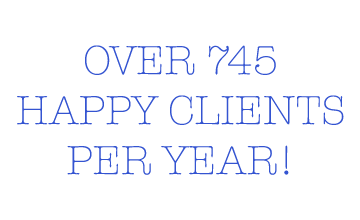
<style>
.page{position:relative;width:360px;height:220px;background:#ffffff}
.page>*{position:absolute;margin:0}
.t1{font:41.7px "AmericanTypewriter-Light";color:#3454d1}
</style>
<div class="page">
<p class="t1" style="left:17px;top:45px;width:327px;height:130px;text-align:center">OVER 745<br>HAPPY CLIENTS<br>PER YEAR!</p>
</div>
